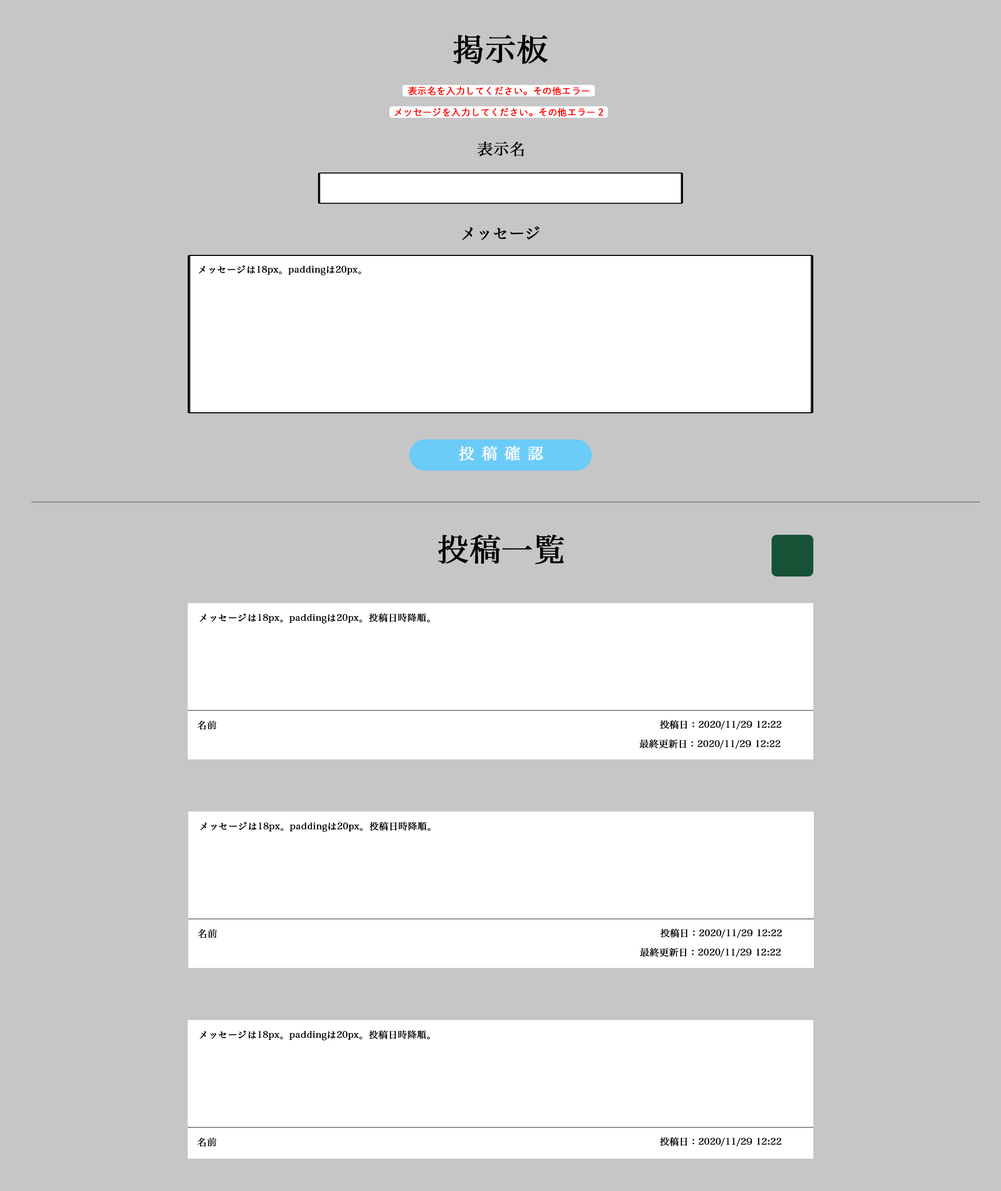
<style>
.page{position:relative;width:1001px;height:1191px;background:#c6c6c6}
.page>*{position:absolute;margin:0}
.t1{font:31.3px "HiraMinPro-W3";color:#000000;font-weight:bold}
.t2{font:9.4px "DNPShueiMGoStd-L";color:#ff0000;font-weight:bold}
.t3{font:15.6px "HiraMinPro-W3";color:#000000;font-weight:bold}
.t4{font:9.4px "HiraMinPro-W3";color:#000000;font-weight:bold}
.t5{font:15.6px "HiraMinPro-W3";color:#ffffff;font-weight:bold}
</style>
<div class="page">
<p class="t1" style="left:453px;top:34px;width:95px;height:30px">掲示板</p>
<p class="t2" style="left:408px;top:86px;width:182px;height:9px">表示名を入力してください。その他エラー</p>
<p class="t2" style="left:395px;top:107px;width:208px;height:10px">メッセージを入力してください。その他エラー２</p>
<p class="t3" style="left:477px;top:141px;width:47px;height:16px">表示名</p>
<p class="t3" style="left:462px;top:226px;width:78px;height:14px">メッセージ</p>
<p class="t4" style="left:199px;top:265px;width:162px;height:10px">メッセージは18px。paddingは20px。</p>
<p class="t5" style="left:459px;top:446px;width:84px;height:15px">投稿確認</p>
<p class="t1" style="left:438px;top:534px;width:126px;height:31px">投稿一覧</p>
<p class="t4" style="left:200px;top:613px;width:230px;height:11px">メッセージは18px。paddingは20px。投稿日時降順。</p>
<p class="t4" style="left:197px;top:720px;width:20px;height:10px">名前</p>
<p class="t4" style="left:660px;top:720px;width:121px;height:10px">投稿日：2020/11/29 12:22</p>
<p class="t4" style="left:639px;top:739px;width:141px;height:10px">最終更新日：2020/11/29 12:22</p>
<p class="t4" style="left:200px;top:822px;width:231px;height:10px">メッセージは18px。paddingは20px。投稿日時降順。</p>
<p class="t4" style="left:198px;top:929px;width:19px;height:9px">名前</p>
<p class="t4" style="left:661px;top:929px;width:121px;height:9px">投稿日：2020/11/29 12:22</p>
<p class="t4" style="left:640px;top:948px;width:141px;height:10px">最終更新日：2020/11/29 12:22</p>
<p class="t4" style="left:200px;top:1030px;width:230px;height:11px">メッセージは18px。paddingは20px。投稿日時降順。</p>
<p class="t4" style="left:197px;top:1138px;width:20px;height:9px">名前</p>
<p class="t4" style="left:660px;top:1137px;width:121px;height:10px">投稿日：2020/11/29 12:22</p>
</div>
